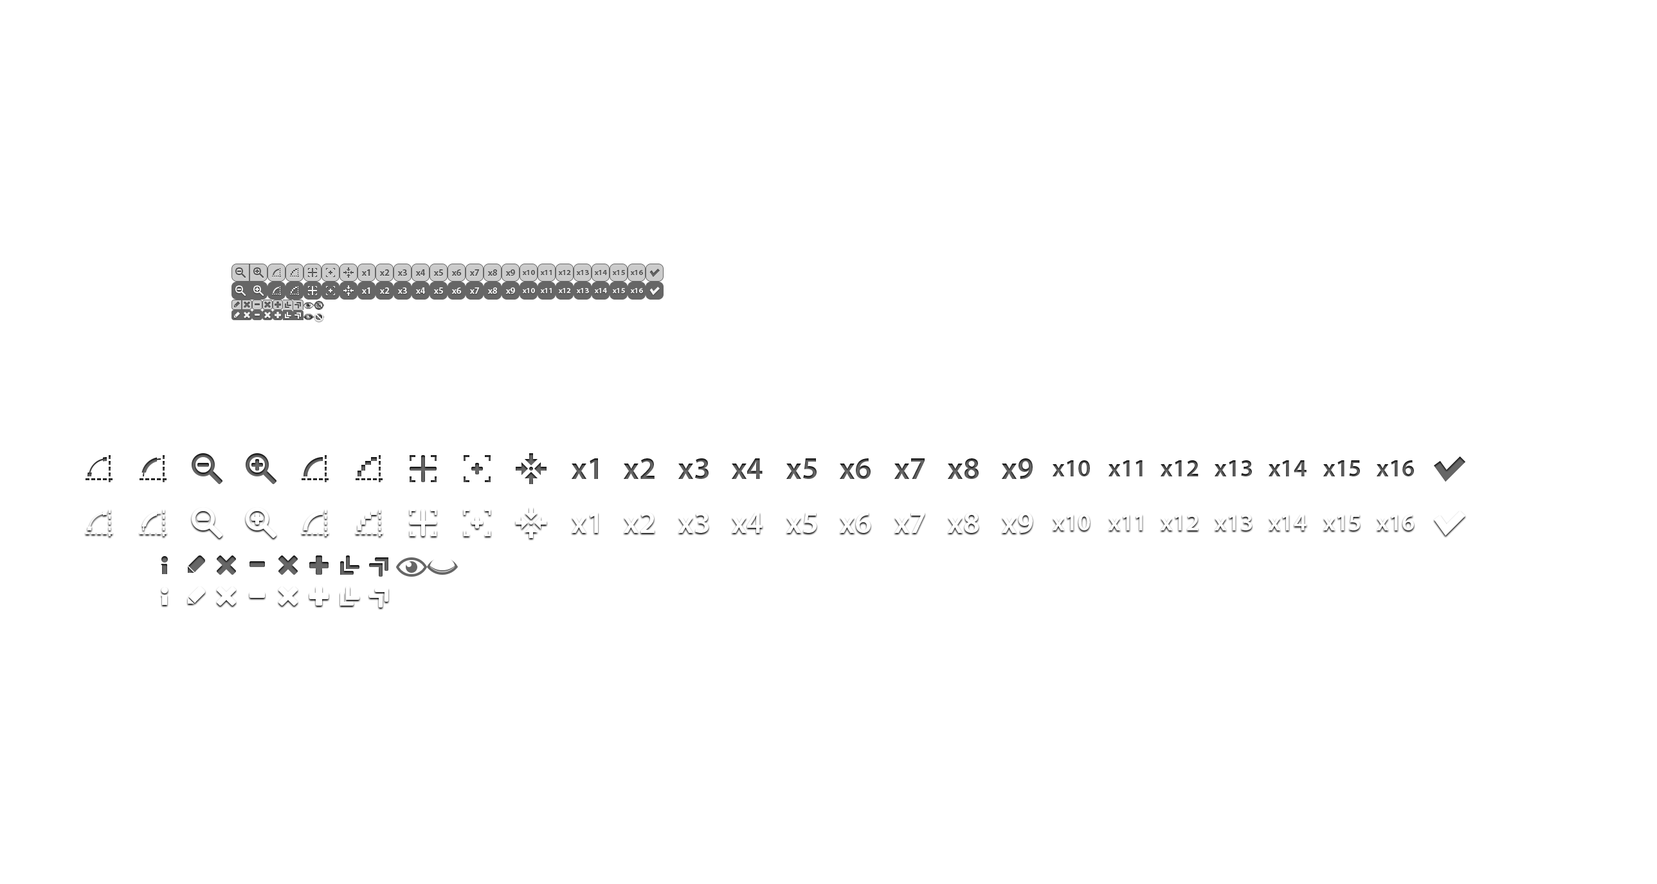
<style>
.page{position:relative;width:1657px;height:884px;background:#ffffff}
.page>*{position:absolute;margin:0}
.t1{font:9px "MyriadPro-Bold";color:#595959}
.t2{font:9px "MyriadPro-Bold";color:#565656}
.t3{font:9px "MyriadPro-Bold";color:#585858}
.t4{font:9px "MyriadPro-Bold";color:#535353}
.t5{font:9px "MyriadPro-Bold";color:#575757}
.t6{font:7.7px "MyriadPro-Bold";color:#575757}
.t7{font:7.7px "MyriadPro-Bold";color:#545454}
.t8{font:7.7px "MyriadPro-Bold";color:#565656}
.t9{font:7.7px "MyriadPro-Bold";color:#585858}
</style>
<div class="page">
<p class="t1" style="left:361px;top:269px;width:9px;height:7px">x1</p>
<p class="t2" style="left:379px;top:269px;width:11px;height:7px">x2</p>
<p class="t3" style="left:397px;top:269px;width:10px;height:7px">x3</p>
<p class="t3" style="left:415px;top:269px;width:10px;height:7px">x4</p>
<p class="t4" style="left:433px;top:269px;width:10px;height:7px">x5</p>
<p class="t5" style="left:451px;top:269px;width:11px;height:7px">x6</p>
<p class="t2" style="left:469px;top:269px;width:10px;height:7px">x7</p>
<p class="t5" style="left:487px;top:269px;width:10px;height:7px">x8</p>
<p class="t3" style="left:505px;top:269px;width:10px;height:7px">x9</p>
<p class="t6" style="left:522px;top:270px;width:13px;height:5px">x10</p>
<p class="t7" style="left:540px;top:270px;width:12px;height:5px">x11</p>
<p class="t7" style="left:558px;top:270px;width:13px;height:5px">x12</p>
<p class="t8" style="left:576px;top:270px;width:13px;height:5px">x13</p>
<p class="t6" style="left:594px;top:270px;width:13px;height:5px">x14</p>
<p class="t8" style="left:612px;top:270px;width:13px;height:5px">x15</p>
<p class="t9" style="left:630px;top:270px;width:13px;height:5px">x16</p>
</div>
